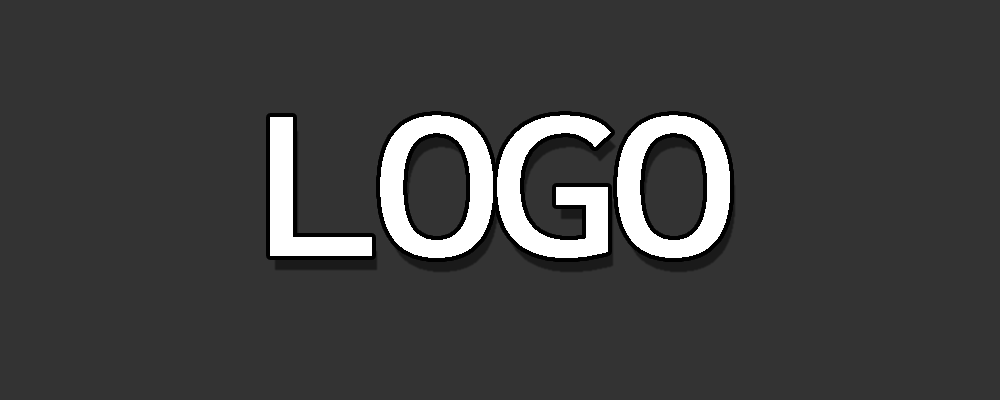
<style>
.page{position:relative;width:1000px;height:400px;background:#333333}
.page>*{position:absolute;margin:0}
.t1{font:200px "CascadiaCode-Regular";letter-spacing:-0.05em;color:#ffffff;font-weight:bold;scale:1.11 1}
</style>
<div class="page">
<p class="t1" style="left:270px;top:115px;width:460px;height:143px">LOGO</p>
</div>
